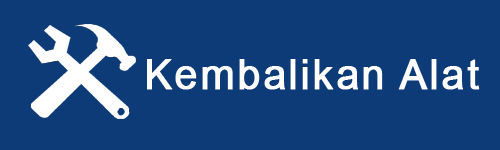
<style>
.page{position:relative;width:500px;height:150px;background:#0d3b78}
.page>*{position:absolute;margin:0}
.t1{font:42.1px "ArialMT";letter-spacing:0.04em;color:#ffffff;font-weight:bold}
</style>
<div class="page">
<p class="t1" style="left:147px;top:59px;width:333px;height:31px">Kembalikan Alat</p>
</div>
